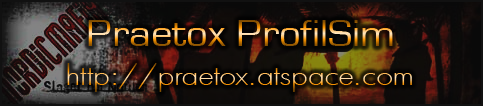
<style>
.page{position:relative;width:483px;height:106px}
.page>*{position:absolute;margin:0}
.t1{font:38.7px "EurostileRegular";scale:1.11 1}
.t2{font:27px "Futura-Light";scale:1.11 1}
</style>
<div class="page">
<p class="t1" style="left:88px;top:20px;width:305px;height:26px">Praetox ProfilSim</p>
<p class="t2" style="left:67px;top:63px;width:345px;height:29px">http://praetox.atspace.com</p>
</div>
